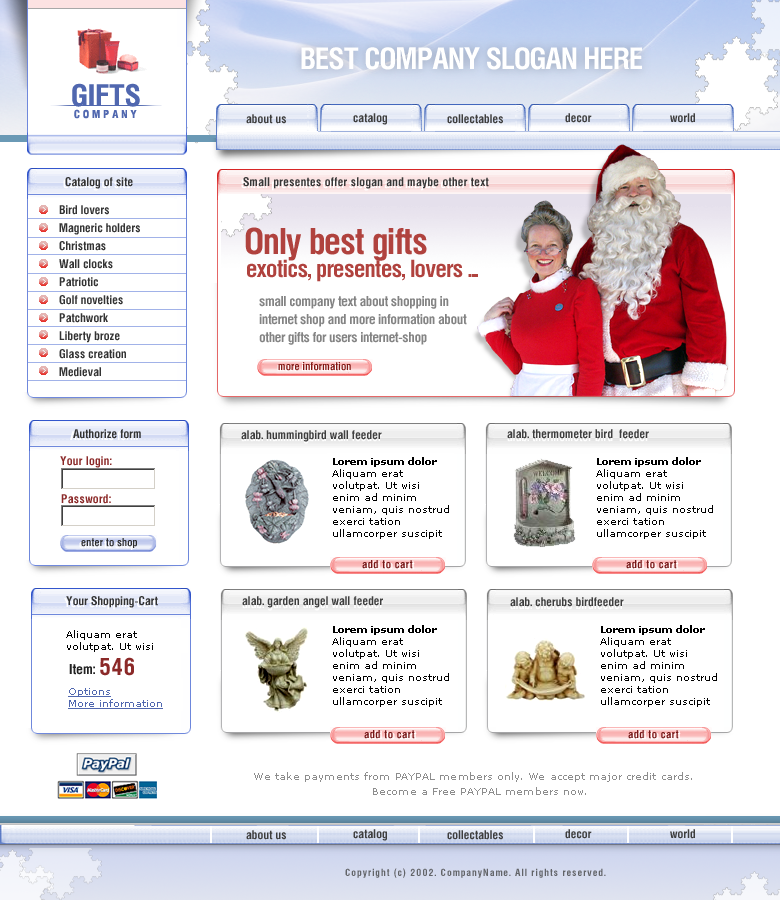
<style>
.page{position:relative;width:780px;height:900px;background:#ffffff}
.page>*{position:absolute;margin:0}
.t1{font:30px "HeliosCond-Bold";letter-spacing:-0.025em;color:#ffffff}
.t2{font:30px "HeliosCond-Bold";letter-spacing:0.01em;color:#5067af}
.t3{font:11px "HeliosCond-Bold";letter-spacing:0.28em;color:#5067af}
.t4{font:12px "HeliosCond-Bold";letter-spacing:0.01em;color:#333333}
.t5{font:12px "HeliosCond-Bold";letter-spacing:0.025em;color:#373737}
.t6{font:12px/9px "HeliosCond-Bold";letter-spacing:0.01em;color:#333333}
.t7{font:36px "HeliosCond-Bold";letter-spacing:-0.025em;color:#b0423e}
.t8{font:24px "HeliosCond-Bold";letter-spacing:-0.025em;color:#b0423e}
.t9{font:14px/9px "HeliosCond-Bold";letter-spacing:-0.025em;color:#838383}
.t10{font:12px "HeliosCond-Bold";letter-spacing:0.01em;color:#3e3e3e}
.t11{font:12px "HeliosCond-Bold";letter-spacing:0.025em;color:#8b2928}
.t12{font:11px "HeliosCond-Bold";letter-spacing:0.01em;color:#2c2c2c}
.t13{font:14px "HeliosCond-Bold";letter-spacing:0.01em;color:#222222}
.t14{font:24px "HeliosCond-Bold";letter-spacing:0.01em;color:#8b2928}
.t15{font:10px "Verdana";letter-spacing:0.01em;color:#8d8d8d}
.t16{font:10px "HeliosCond-Bold";letter-spacing:0.1em;color:#626468}
</style>
<div class="page">
<p class="t1" style="left:301px;top:47px;width:341px;height:23px">BEST COMPANY SLOGAN HERE</p>
<p class="t2" style="left:72px;top:83px;width:68px;height:24px">GIFTS</p>
<p class="t3" style="left:74px;top:109px;width:63px;height:10px">COMPANY</p>
<p class="t4" style="left:65px;top:177px;width:68px;height:12px">Catalog of site</p>
<p class="t5" style="left:243px;top:177px;width:246px;height:12px">Small presentes offer slogan and maybe other text</p>
<p class="t6" style="left:59px;top:205px;width:81px;height:172px">Bird lovers<br><br>Magneric holders<br><br>Christmas<br><br>Wall clocks<br><br>Patriotic<br><br>Golf novelties<br><br>Patchwork<br><br>Liberty broze<br><br>Glass creation<br><br>Medieval</p>
<p class="t7" style="left:245px;top:227px;width:182px;height:34px">Only best gifts</p>
<p class="t8" style="left:247px;top:259px;width:231px;height:23px">exotics, presentes, lovers ...</p>
<p class="t9" style="left:259px;top:296px;width:208px;height:49px">small company text about shopping in <br><br>internet shop and more information about <br><br>other gifts for users internet-shop</p>
<p class="t4" style="left:73px;top:429px;width:68px;height:10px">Authorize form</p>
<p class="t10" style="left:241px;top:430px;width:141px;height:12px">alab. hummingbird wall feeder</p>
<p class="t10" style="left:507px;top:429px;width:142px;height:10px">alab. thermometer bird  feeder</p>
<p class="t11" style="left:60px;top:456px;width:52px;height:12px">Your login:</p>
<p class="t11" style="left:61px;top:494px;width:50px;height:10px">Password:</p>
<p class="t12" style="left:81px;top:538px;width:56px;height:10px">enter to shop</p>
<p class="t4" style="left:66px;top:596px;width:92px;height:12px">Your Shopping-Cart</p>
<p class="t10" style="left:242px;top:596px;width:141px;height:12px">alab. garden angel wall feeder</p>
<p class="t10" style="left:510px;top:597px;width:114px;height:10px">alab. cherubs birdfeeder</p>
<p class="t13" style="left:69px;top:664px;width:26px;height:11px">Item:</p>
<p class="t14" style="left:100px;top:657px;width:34px;height:19px">546</p>
<p class="t15" style="left:254px;top:772px;width:438px;height:10px">We take payments from PAYPAL members only. We accept major credit cards.</p>
<p class="t15" style="left:373px;top:787px;width:213px;height:8px">Become a Free PAYPAL members now.</p>
<p class="t16" style="left:345px;top:868px;width:261px;height:10px">Copyright (c) 2002. CompanyName. All rights reserved.</p>
</div>
